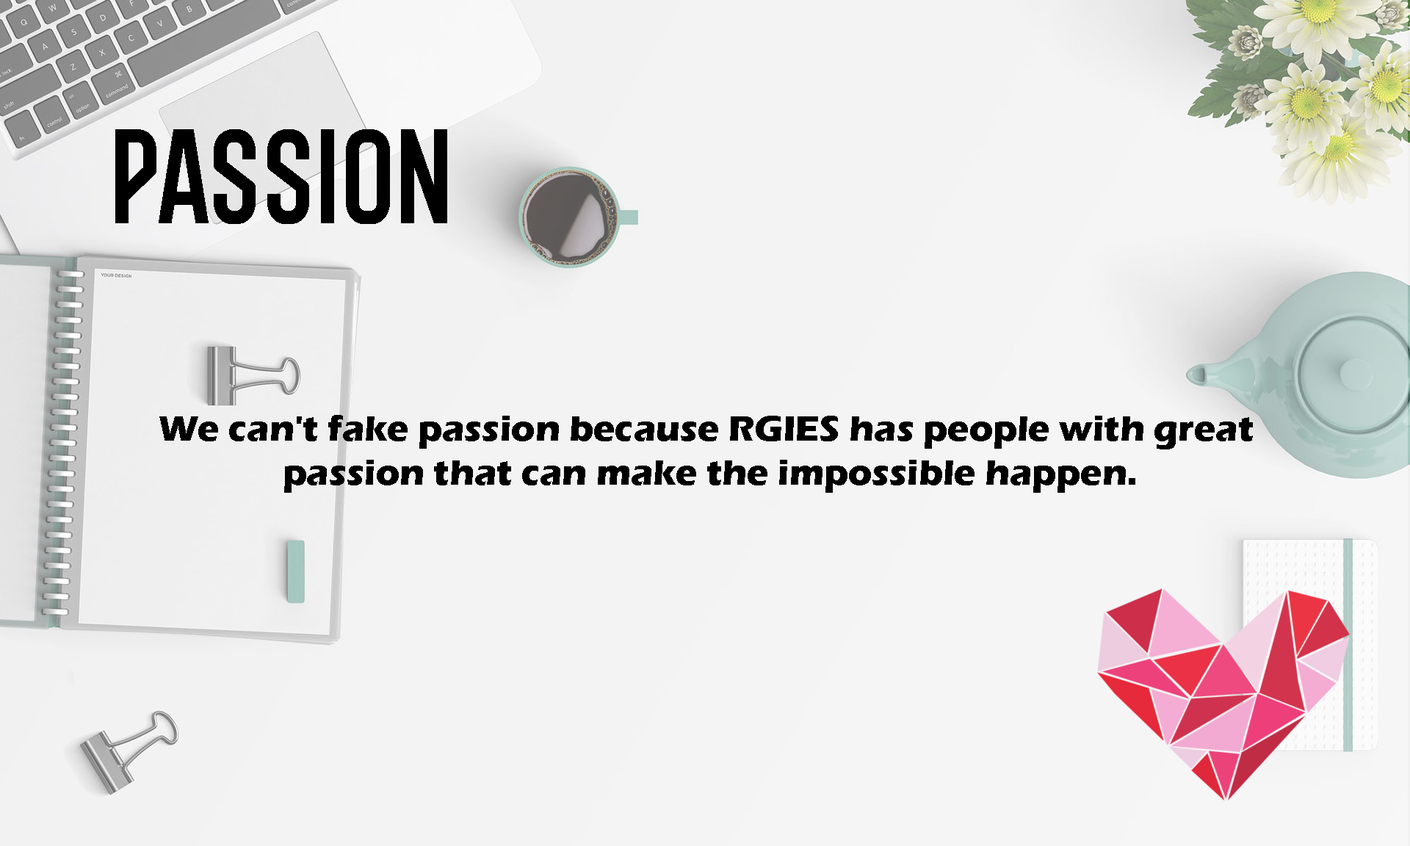
<style>
.page{position:relative;width:1410px;height:846px;background:#f3f3f3}
.page>*{position:absolute;margin:0}
.t1{font:110.1px "BROOKLINE-Condensed";color:#000000}
.t2{font:36.7px "ErasITC-Bold";color:#000000}
</style>
<div class="page">
<p class="t1" style="left:115px;top:129px;width:332px;height:95px">PASSION</p>
<p class="t2" style="left:159px;top:415px;width:1094px;height:78px;text-align:center">We can't fake passion because RGIES has people with great <br>passion that can make the impossible happen.</p>
</div>
